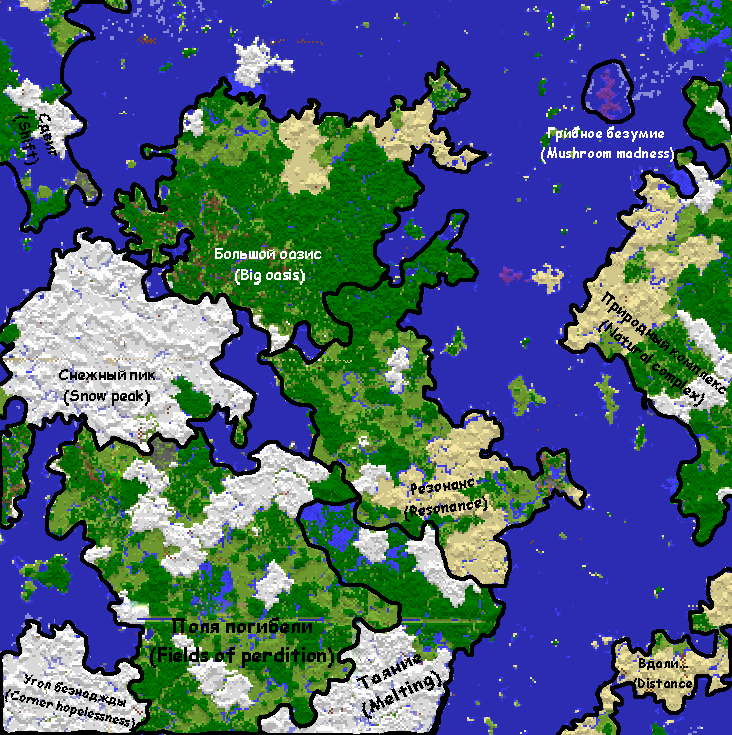
<style>
.page{position:relative;width:732px;height:735px;background:#2c2cb2}
.page>*{position:absolute;margin:0}
.t1{font:18px "Comic-Sans-MS-pixel-rus-eng";color:#000000}
.t2{font:16.8px "Comic-Sans-MS-pixel-rus-eng";color:#ffffff}
.t3{font:18.1px "Comic-Sans-MS-pixel-rus-eng";color:#ffffff}
.t4{font:18.1px "Comic-Sans-MS-pixel-rus-eng";color:#000000}
.t5{font:18.1px "Comic-Sans-MS-pixel-rus-eng";color:#010101}
.t6{font:23.9px "Comic-Sans-MS-pixel-rus-eng";color:#000000}
.t7{font:20.5px "Comic-Sans-MS-pixel-rus-eng";color:#000000;scale:1.16 1}
.t8{font:16.4px "Comic-Sans-MS-pixel-rus-eng";color:#000000}
.t9{font:15.3px "Comic-Sans-MS-pixel-rus-eng";color:#000000}
</style>
<div class="page">
<p class="t1" style="left:12px;top:113px;width:45px;height:53px;text-align:center;rotate:75deg">Сдвиг<br>(Shift)</p>
<p class="t2" style="left:541px;top:126px;width:133px;height:36px;text-align:center">Грибное безумие <br>(Mushroom madness)</p>
<p class="t3" style="left:215px;top:248px;width:106px;height:37px;text-align:center">Большой оазис <br>(Big oasis)</p>
<p class="t4" style="left:598px;top:291px;width:128px;height:116px;text-align:center;rotate:38deg">Природный комплекс <br>(Natural complex)</p>
<p class="t4" style="left:59px;top:369px;width:96px;height:37px;text-align:center">Снежный пик<br>(Snow peak)</p>
<p class="t5" style="left:404px;top:478px;width:84px;height:44px;text-align:center;rotate:-7deg">Резонанс<br>(Resonance)</p>
<p class="t6" style="left:150px;top:617px;width:184px;height:51px;text-align:center">Поля погибели<br>(Fields of perdition)</p>
<p class="t7" style="left:356px;top:654px;width:86px;height:65px;text-align:center;rotate:-26deg">Таяние<br>(Melting)</p>
<p class="t8" style="left:633px;top:658px;width:65px;height:34px;text-align:center">Вдали... <br>(Distance)</p>
<p class="t9" style="left:5px;top:674px;width:130px;height:57px;text-align:center;rotate:13deg">Угол безнаджды<br>(Сorner hopelessness)</p>
</div>
